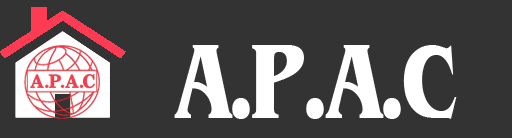
<style>
.page{position:relative;width:512px;height:138px;background:#333333}
.page>*{position:absolute;margin:0}
.t1{font:100.1px "BrianJamesCondensed-Bold";letter-spacing:-0.02em;color:#ffffff;text-transform:uppercase;scale:0.91 1}
</style>
<div class="page">
<p class="t1" style="left:174px;top:45px;width:283px;height:74px">A.P.A.C</p>
</div>
